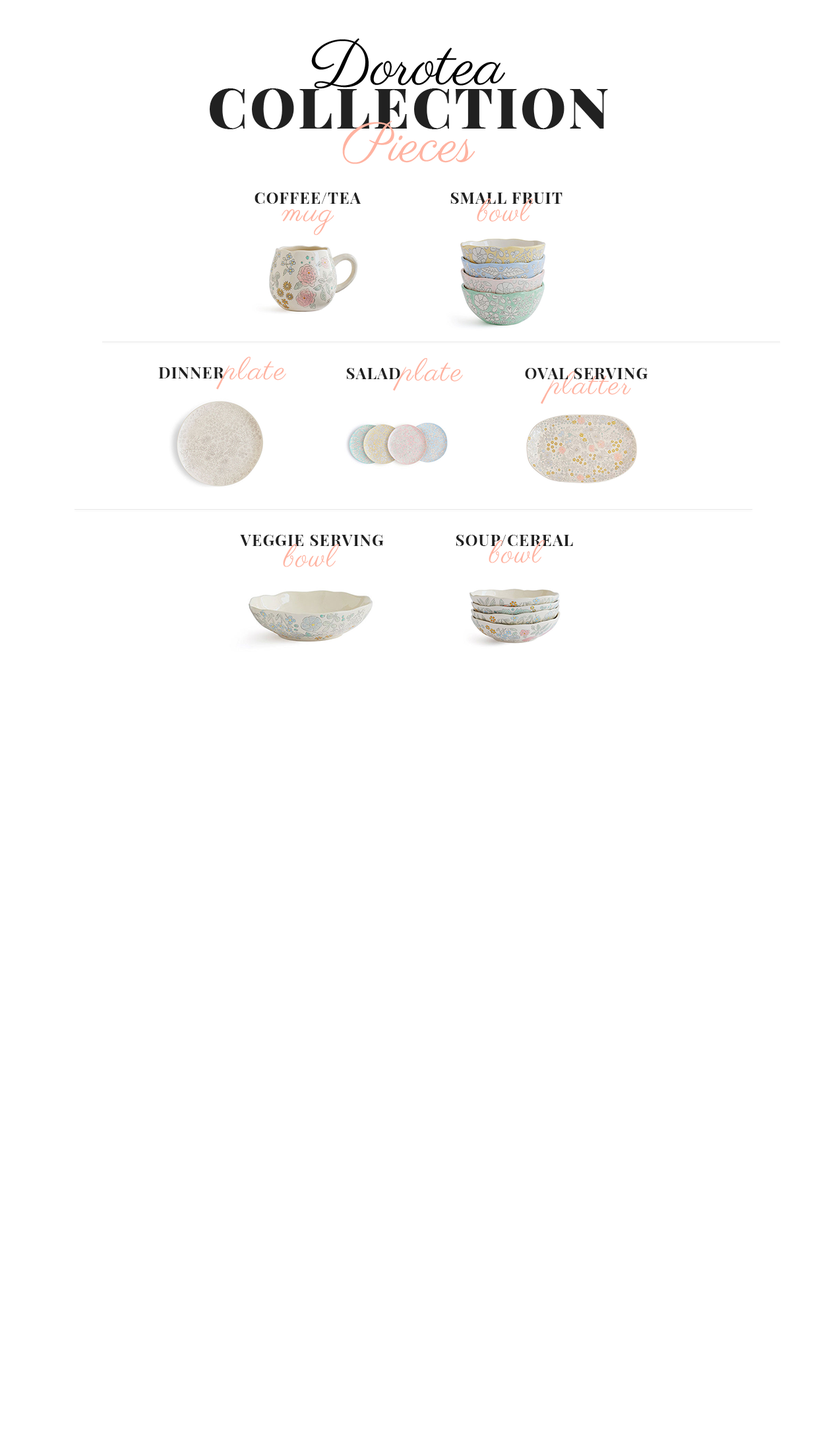
<style>
.page{position:relative;width:819px;height:1456px;background:#ffffff}
.page>*{position:absolute;margin:0}
.t1{font:63.3px "Parisienne-Regular";color:#000000}
.t2{font:55.4px "PlayfairDisplay-Black";letter-spacing:0.05em;color:#212121}
.t3{font:55.4px "Parisienne-Regular";color:#ffb3a1}
.t4{font:15.8px "PlayfairDisplay-Bold";letter-spacing:0.05em;color:#212121}
.t5{font:31.7px "Parisienne-Regular";letter-spacing:0.05em;color:#ffb3a1}
</style>
<div class="page">
<p class="t1" style="left:311px;top:38px;width:194px;height:50px">Dorotea</p>
<p class="t2" style="left:210px;top:88px;width:398px;height:41px">COLLECTION</p>
<p class="t3" style="left:342px;top:121px;width:133px;height:43px">Pieces</p>
<p class="t4" style="left:255px;top:193px;width:106px;height:11px">COFFEE/TEA</p>
<p class="t4" style="left:450px;top:193px;width:112px;height:11px">SMALL FRUIT</p>
<p class="t5" style="left:477px;top:198px;width:56px;height:24px">bowl</p>
<p class="t5" style="left:282px;top:209px;width:52px;height:26px">mug</p>
<p class="t5" style="left:216px;top:357px;width:70px;height:33px">plate</p>
<p class="t5" style="left:393px;top:358px;width:70px;height:33px">plate</p>
<p class="t4" style="left:158px;top:367px;width:67px;height:12px">DINNER</p>
<p class="t4" style="left:346px;top:368px;width:54px;height:11px">SALAD</p>
<p class="t4" style="left:525px;top:368px;width:123px;height:11px">OVAL SERVING</p>
<p class="t5" style="left:541px;top:371px;width:90px;height:33px">platter</p>
<p class="t4" style="left:240px;top:535px;width:144px;height:11px">VEGGIE SERVING</p>
<p class="t5" style="left:283px;top:543px;width:56px;height:24px">bowl</p>
<p class="t4" style="left:456px;top:535px;width:117px;height:11px">SOUP/CEREAL</p>
<p class="t5" style="left:489px;top:539px;width:56px;height:24px">bowl</p>
</div>
